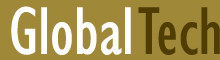
<style>
.page{position:relative;width:220px;height:60px;background:#9f8838}
.page>*{position:absolute;margin:0}
.t1{font:70px "GillSansMT-Condensed";color:#ffffff}
.t2{font:70px "GillSansMT-Condensed";color:#4f3d01}
</style>
<div class="page">
<p class="t1" style="left:11px;top:6px;width:120px;height:49px">Global</p>
<p class="t2" style="left:138px;top:7px;width:82px;height:48px">Tech</p>
</div>
